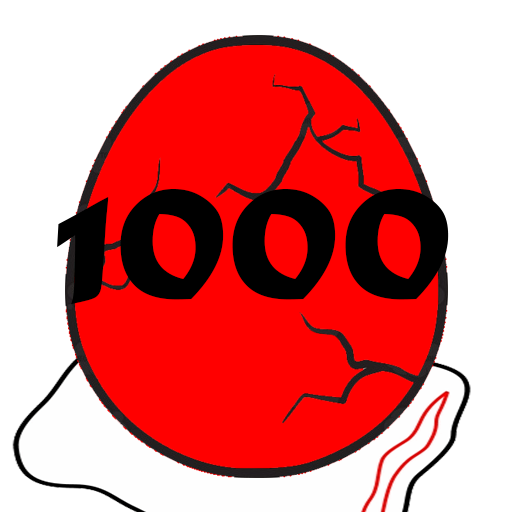
<style>
.page{position:relative;width:512px;height:512px;background:#ffffff}
.page>*{position:absolute;margin:0}
.t1{font:170.8px "MaturaMTScriptCapitals";color:#000000}
</style>
<div class="page">
<p class="t1" style="left:57px;top:189px;width:392px;height:115px">1000</p>
</div>
